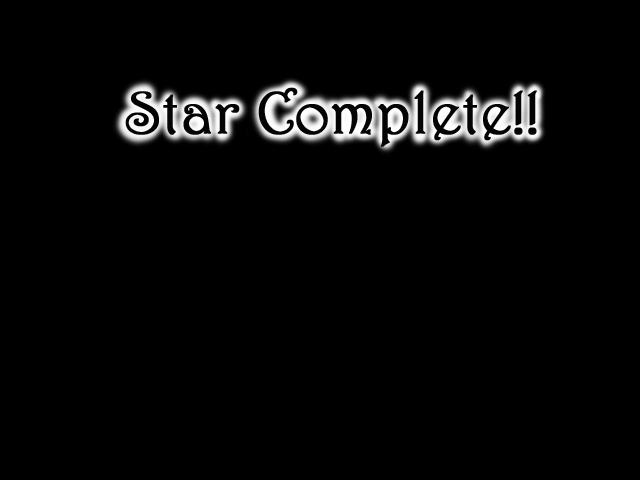
<style>
.page{position:relative;width:640px;height:480px;background:#000000}
.page>*{position:absolute;margin:0}
.t1{font:60px "Harrington";color:#030403;font-weight:bold}
</style>
<div class="page">
<p class="t1" style="left:125px;top:87px;width:412px;height:60px">Star Complete!!</p>
</div>
